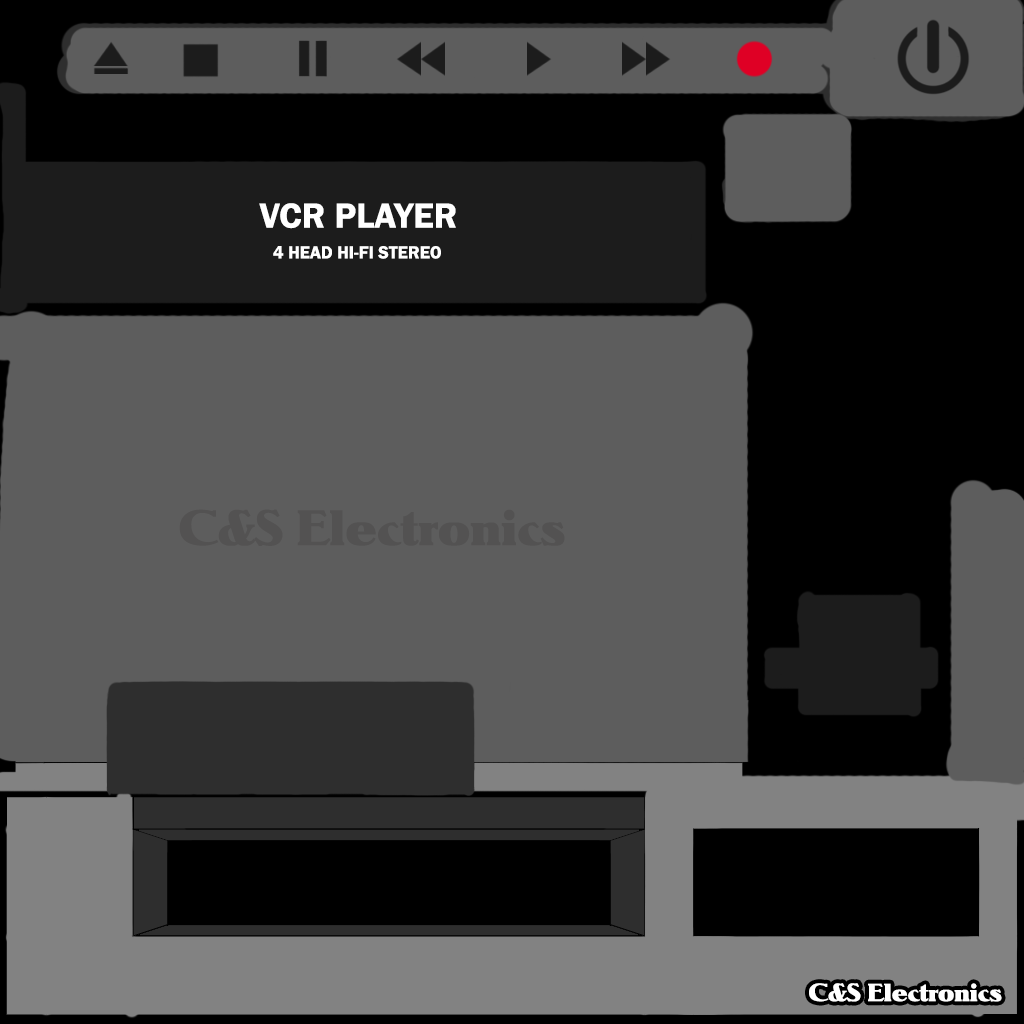
<style>
.page{position:relative;width:1024px;height:1024px;background:#5d5d5d}
.page>*{position:absolute;margin:0}
.t1{font:36px "FranklinGothic-Demi";color:#ffffff}
.t2{font:18px "FranklinGothic-Demi";color:#ffffff}
.t3{font:48px "Notram";color:#535252}
.t4{font:24px "Notram";color:#ffffff}
</style>
<div class="page">
<p class="t1" style="left:259px;top:203px;width:197px;height:26px">VCR PLAYER</p>
<p class="t2" style="left:273px;top:246px;width:168px;height:13px">4 HEAD HI-FI STEREO</p>
<p class="t3" style="left:179px;top:509px;width:386px;height:37px">C&amp;S Electronics</p>
<p class="t4" style="left:809px;top:983px;width:193px;height:19px">C&amp;S Electronics</p>
</div>
